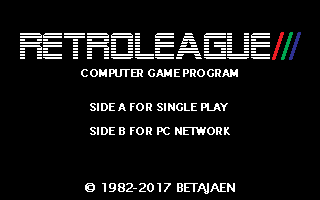
<style>
.page{position:relative;width:320px;height:200px;background:#000000}
.page>*{position:absolute;margin:0}
.t1{font:37.4px "SFAlienEncounters";color:#ffffff;text-transform:uppercase;scale:0.93 1}
.t2{font:29px "Tahoma";letter-spacing:-0.1em;color:#ed1c24;font-weight:bold}
.t3{font:29px "Tahoma";letter-spacing:-0.1em;color:#00a651;font-weight:bold}
.t4{font:29px "Tahoma";letter-spacing:-0.1em;color:#2e3192;font-weight:bold}
.t5{font:11px "LucidaSans";letter-spacing:-0.05em;color:#ffffff;font-weight:bold}
.t6{font:11px/24.5px "LucidaSans";letter-spacing:-0.05em;color:#ffffff;font-weight:bold}
.t7{font:12px "LucidaSans";letter-spacing:-0.05em;color:#ffffff;font-weight:bold}
</style>
<div class="page">
<p class="t1" style="left:20px;top:33px;width:250px;height:26px">retroleague</p>
<p class="t2" style="left:272px;top:32px;width:29px;height:28px">/<span class="t3">/</span><span class="t4">/</span></p>
<p class="t5" style="left:81px;top:69px;width:157px;height:8px">COMPUTER GAME PROGRAM</p>
<p class="t6" style="left:90px;top:103px;width:140px;height:32px;text-align:justify">SIDE A FOR SINGLE PLAY<br>SIDE B FOR PC NETWORK</p>
<p class="t7" style="left:85px;top:183px;width:150px;height:11px">© 1982-2017 BETAJAEN</p>
</div>
